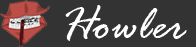
<style>
.page{position:relative;width:196px;height:47px;background:#333333}
.page>*{position:absolute;margin:0}
.t1{font:50px "RageItalic";color:#ffffff}
</style>
<div class="page">
<p class="t1" style="left:65px;top:5px;width:122px;height:36px">Howler</p>
</div>
